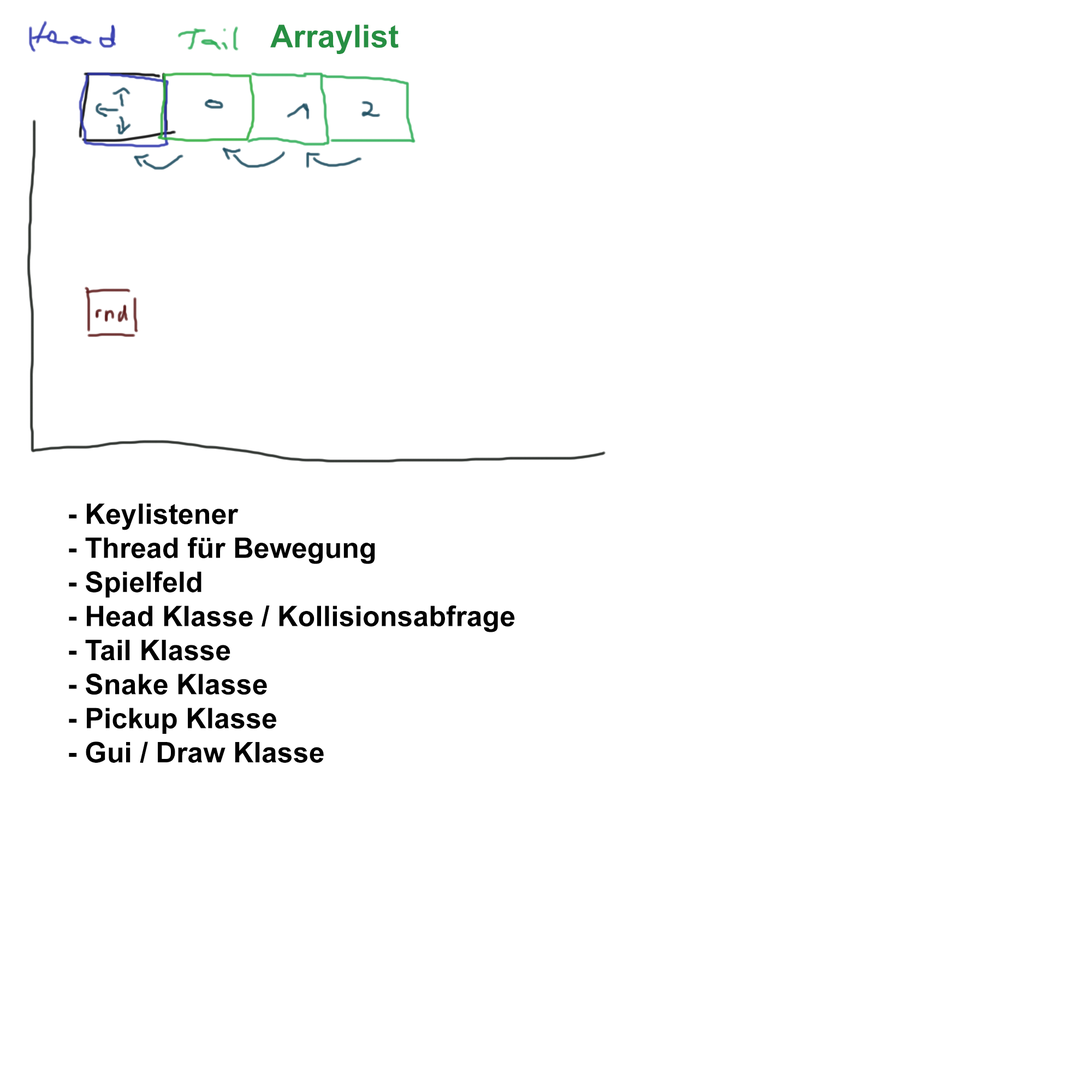
<style>
.page{position:relative;width:1092px;height:1092px;background:#ffffff}
.page>*{position:absolute;margin:0}
.t1{font:31.7px "Arial-BoldMT";color:#268f42}
.t2{font:28.4px "Arial-BoldMT";color:#000000}
</style>
<div class="page">
<p class="t1" style="left:270px;top:25px;width:129px;height:29px">Arraylist</p>
<p class="t2" style="left:69px;top:503px;width:446px;height:260px">- Keylistener<br>- Thread für Bewegung<br>- Spielfeld<br>- Head Klasse / Kollisionsabfrage<br>- Tail Klasse<br>- Snake Klasse<br>- Pickup Klasse<br>- Gui / Draw Klasse</p>
</div>
